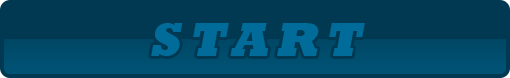
<style>
.page{position:relative;width:510px;height:78px;background:#003951}
.page>*{position:absolute;margin:0}
.t1{font:48.6px "Rockwell-ExtraBold";letter-spacing:0.16em;color:#016c99;font-style:italic}
</style>
<div class="page">
<p class="t1" style="left:151px;top:23px;width:214px;height:33px">START</p>
</div>
